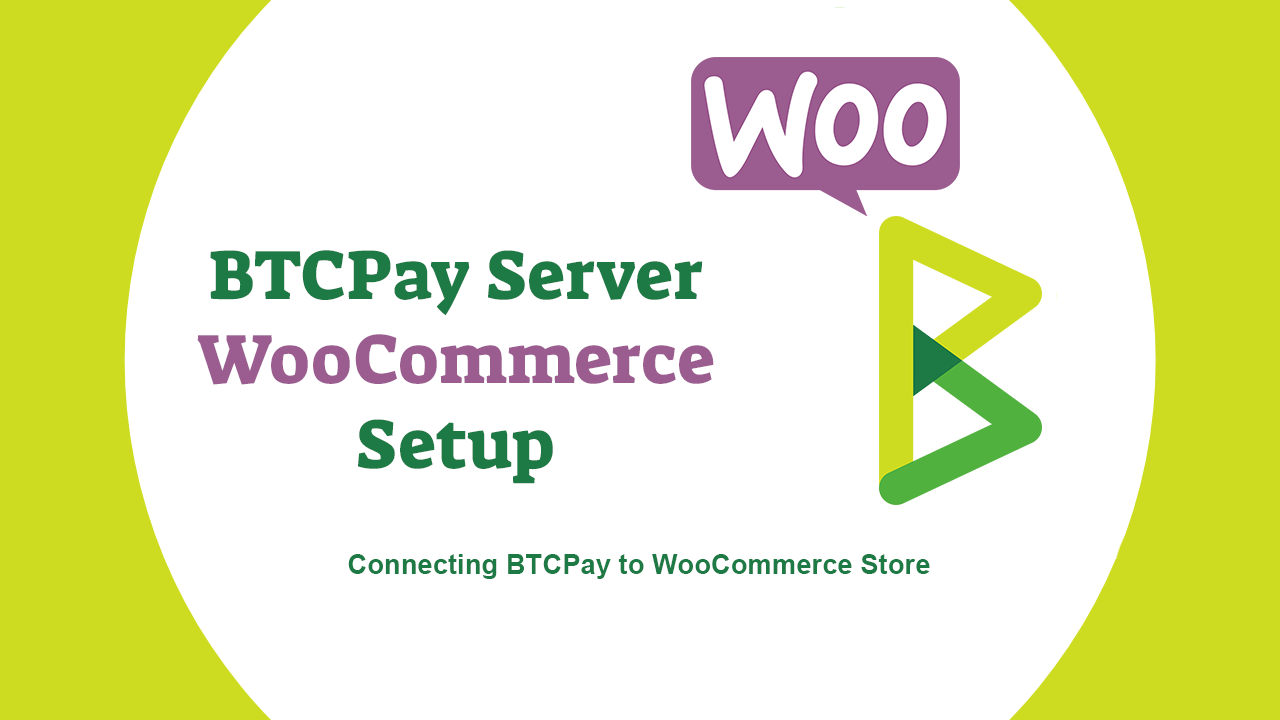
<style>
.page{position:relative;width:1280px;height:720px;background:#ffffff}
.page>*{position:absolute;margin:0}
.t1{font:70.8px "SuezOne-Regular";color:#1e7a44}
.t2{font:70.8px "SuezOne-Regular";color:#9b5c8f}
.t3{font:27.4px "Arial-BoldMT";color:#1e7a44}
</style>
<div class="page">
<p class="t1" style="left:197px;top:250px;width:517px;height:234px;text-align:center">BTCPay Server<br><span class="t2">WooCommerce<br></span>Setup</p>
<p class="t3" style="left:348px;top:554px;width:582px;height:25px">Connecting BTCPay to WooCommerce Store</p>
</div>
